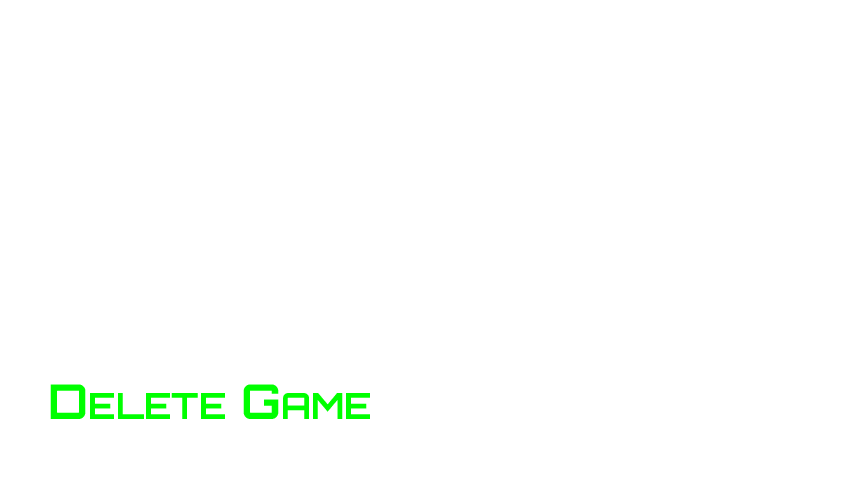
<style>
.page{position:relative;width:854px;height:480px;background:#ffffff}
.page>*{position:absolute;margin:0}
.t1{font:36px "Orbitron-Bold";color:#00ff00}
.t2{font:48px "Orbitron-Bold";color:#00ff00}
</style>
<div class="page">
<p class="t1" style="left:50px;top:384px;width:320px;height:35px"><span class="t2">D</span>ELETE <span class="t2">G</span>AME</p>
</div>
